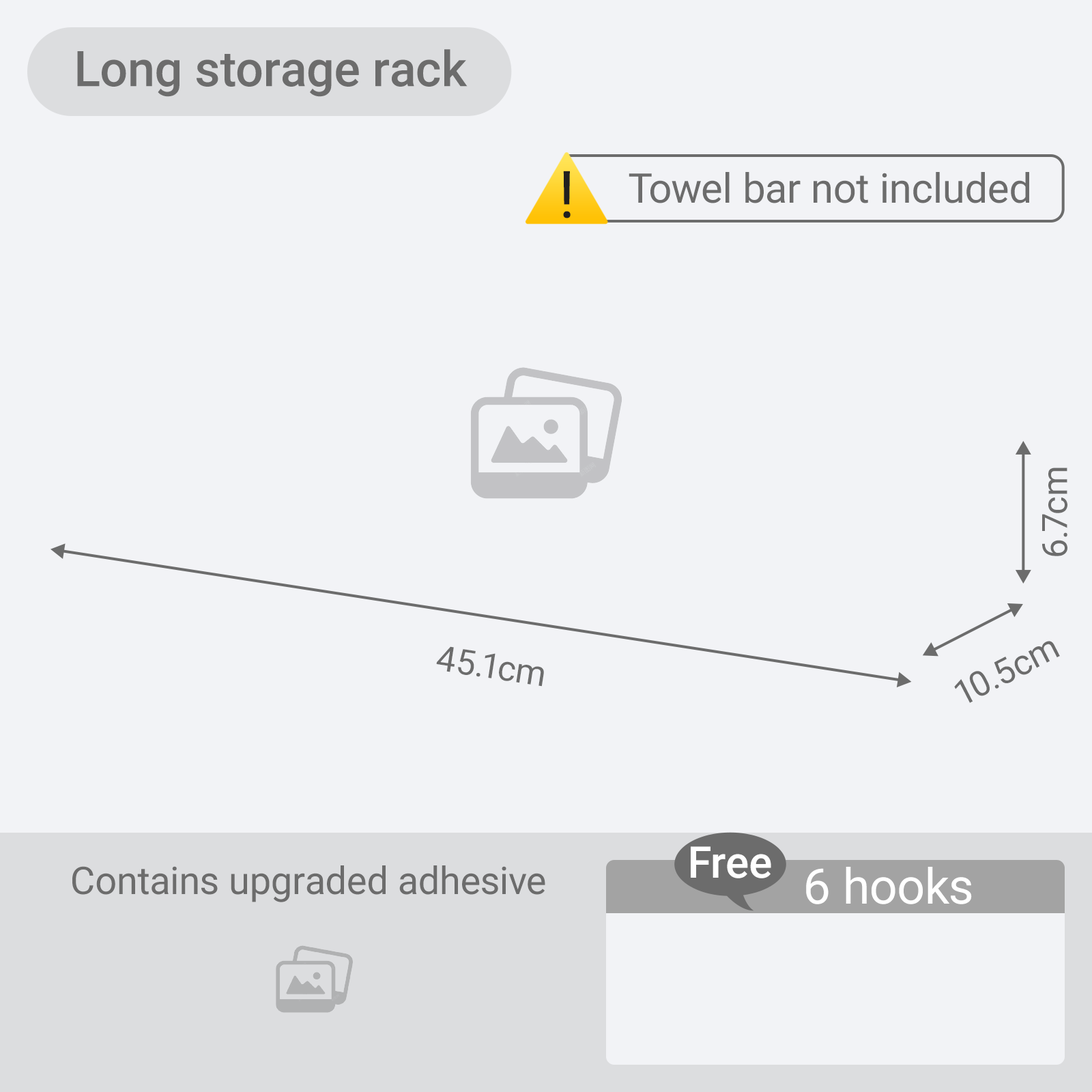
<style>
.page{position:relative;width:1092px;height:1092px;background:#f2f3f6}
.page>*{position:absolute;margin:0}
.t1{font:49.1px "Roboto-Medium";color:#6c6c6c}
.t2{font:65.5px "Roboto-Regular";color:#22201f}
.t3{font:40.9px "Roboto-Regular";color:#6c6c6c}
.t4{font:34.9px "Roboto-Regular";color:#6c6c6c}
.t5{font:43.7px "Roboto-Medium";color:#ffffff}
.t6{font:38.2px "Roboto-Regular";color:#6c6c6c}
.t7{font:49.1px "Roboto-Regular";color:#ffffff}
</style>
<div class="page">
<p class="t1" style="left:77px;top:49px;width:391px;height:48px">Long storage rack</p>
<p class="t2" style="left:563px;top:171px;width:8px;height:47px">!</p>
<p class="t3" style="left:629px;top:172px;width:400px;height:31px">Towel bar not included</p>
<p class="t4" style="left:1042px;top:468px;width:25px;height:88px;rotate:-90deg">6.7cm</p>
<p class="t4" style="left:954px;top:641px;width:106px;height:62px;rotate:-27deg">10.5cm</p>
<p class="t4" style="left:436px;top:646px;width:108px;height:41px;rotate:9deg">45.1cm</p>
<p class="t5" style="left:691px;top:846px;width:80px;height:32px">Free</p>
<p class="t6" style="left:72px;top:865px;width:473px;height:37px">Contains upgraded adhesive</p>
<p class="t7" style="left:806px;top:867px;width:166px;height:37px">6 hooks</p>
</div>
